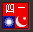
<style>
.page{position:relative;width:33px;height:32px;background:#f20000}
.page>*{position:absolute;margin:0}
.t1{font:10.4px "SimSun";color:#ffffff}
</style>
<div class="page">
<p class="t1" style="left:6px;top:4px;width:19px;height:9px">四一</p>
</div>
